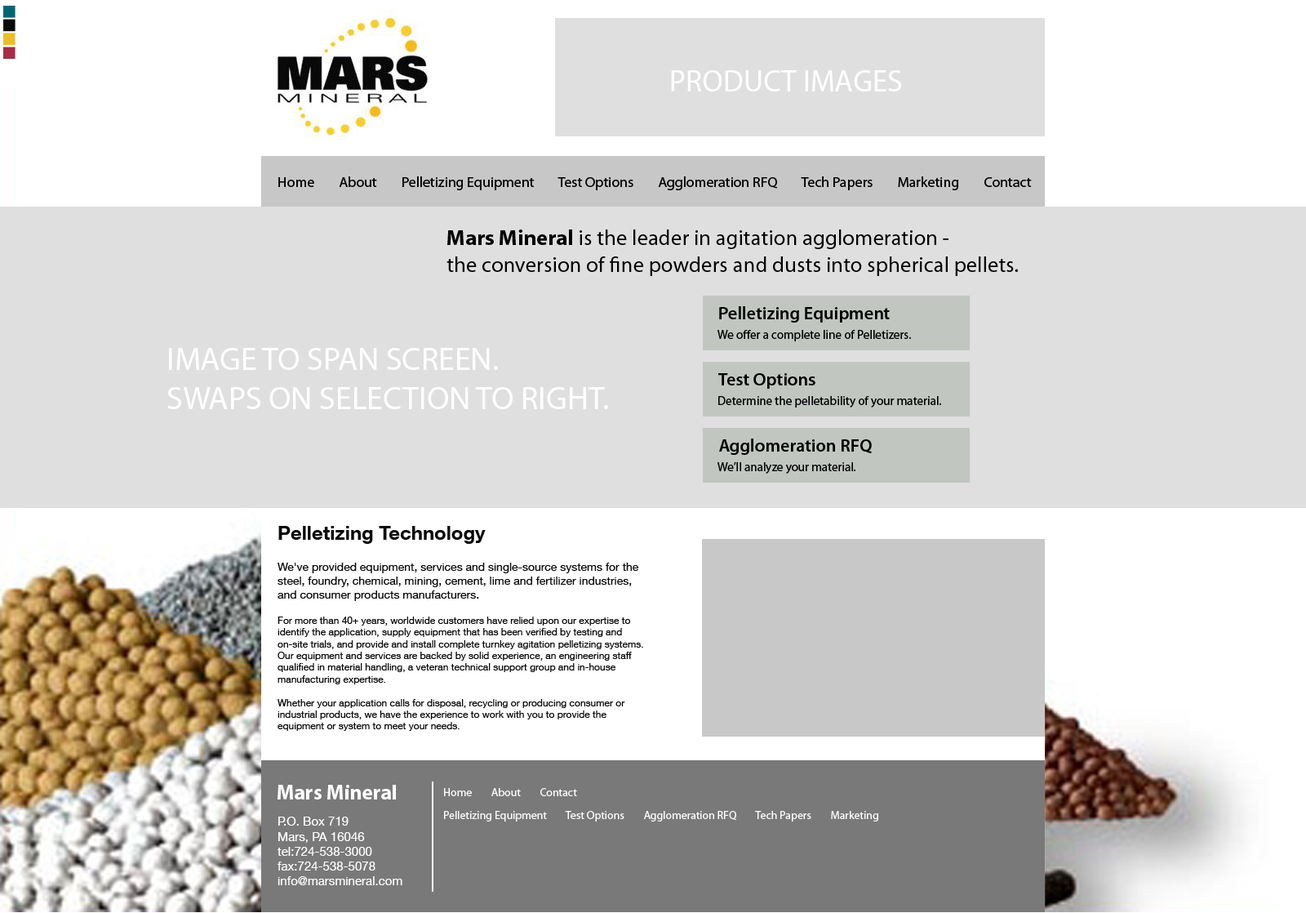
<style>
.page{position:relative;width:1306px;height:913px;background:#dfdfdf}
.page>*{position:absolute;margin:0}
.t1{font:30.4px "MyriadPro-Regular";color:#ffffff}
.t2{font:14.5px "MyriadPro-Regular";color:#000000}
.t3{font:21.9px "MyriadPro-Regular";color:#000000}
.t4{font:21.9px "MyriadPro-Bold";color:#000000}
.t5{font:18px "MyriadPro-Semibold";color:#000000}
.t6{font:12.3px "MyriadPro-Regular";color:#000000}
.t7{font:32.6px "MyriadPro-Regular";color:#ffffff}
.t8{font:19.5px "HelveticaNeueLTCom-Bd";color:#080908}
.t9{font:9.8px "HelveticaNeueLTCom-Roman";color:#090909}
.t10{font:11.4px "HelveticaNeueLTCom-Roman";color:#090909}
.t11{font:20.8px "MyriadPro-Bold";color:#ffffff}
.t12{font:11.3px "MyriadPro-Regular";color:#ffffff}
.t13{font:12.3px "HelveticaNeueLTCom-Roman";color:#ffffff}
</style>
<div class="page">
<p class="t1" style="left:671px;top:70px;width:230px;height:21px">PRODUCT IMAGES</p>
<p class="t2" style="left:278px;top:176px;width:754px;height:14px">Home        About        Pelletizing Equipment        Test Options        Agglomeration RFQ        Tech Papers        Marketing        Contact</p>
<p class="t3" style="left:447px;top:229px;width:571px;height:47px"><span class="t4">Mars Mineral</span> is the leader in agitation agglomeration - <br>the conversion of fine powders and dusts into spherical pellets.</p>
<p class="t5" style="left:719px;top:306px;width:171px;height:17px">Pelletizing Equipment</p>
<p class="t6" style="left:718px;top:330px;width:193px;height:11px">We offer a complete line of Pelletizers.</p>
<p class="t7" style="left:167px;top:348px;width:441px;height:61px">IMAGE TO SPAN SCREEN. <br>SWAPS ON SELECTION TO RIGHT.</p>
<p class="t5" style="left:718px;top:373px;width:98px;height:16px">Test Options</p>
<p class="t6" style="left:718px;top:396px;width:223px;height:11px">Determine the pelletability of your material.</p>
<p class="t5" style="left:719px;top:438px;width:153px;height:17px">Agglomeration RFQ</p>
<p class="t6" style="left:718px;top:461px;width:138px;height:13px">We’ll analyze your material.</p>
<p class="t8" style="left:278px;top:526px;width:208px;height:18px">Pelletizing Technology</p>
<p class="t9" style="left:278px;top:563px;width:365px;height:168px"><span class="t10">We've provided equipment, services and single-source systems for the steel, foundry, chemical, mining, cement, lime and fertilizer industries, and consumer products manufacturers.<br><br></span>For more than 40+ years, worldwide customers have relied upon our expertise to identify the application, supply equipment that has been verified by testing and on-site trials, and provide and install complete turnkey agitation pelletizing systems. Our equipment and services are backed by solid experience, an engineering staff qualified in material handling, a veteran technical support group and in-house manufacturing expertise.<br><br>Whether your application calls for disposal, recycling or producing consumer or industrial products, we have the experience to work with you to provide the equipment or system to meet your needs.</p>
<p class="t11" style="left:278px;top:785px;width:118px;height:14px">Mars Mineral</p>
<p class="t12" style="left:444px;top:788px;width:133px;height:8px">Home        About        Contact</p>
<p class="t13" style="left:278px;top:816px;width:125px;height:69px">P.O. Box 719<br>Mars, PA 16046 <br>tel:724-538-3000<br>fax:724-538-5078 <br>info@marsmineral.com</p>
<p class="t12" style="left:444px;top:811px;width:435px;height:10px">Pelletizing Equipment        Test Options        Agglomeration RFQ        Tech Papers        Marketing</p>
</div>
